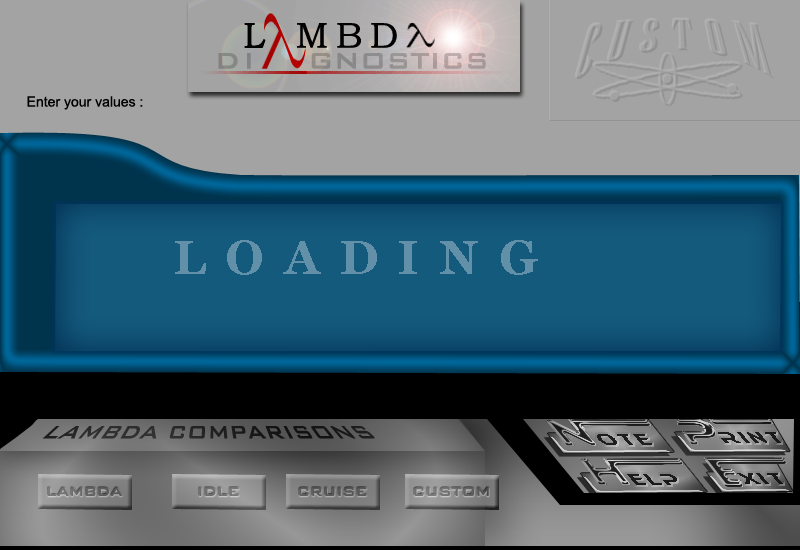
<style>
.page{position:relative;width:800px;height:550px;background:#a3a3a3}
.page>*{position:absolute;margin:0}
.t1{font:14px "ArialMT";color:#000000}
.t2{font:48px "Georgia-Bold";letter-spacing:0.4em;color:#6190a8}
.t3{font:24px "BankGothicBT-Medium";color:#1f1f1f}
.t4{font:20px "Ethnocentric";letter-spacing:0.2em;color:#1e1e1e;scale:0.77 1}
.t5{font:20px "Ethnocentric";letter-spacing:0.3em;color:#1e1e1e;scale:0.77 1}
.t6{font:20px "Ethnocentric";letter-spacing:0.2em;color:#1d1d1d;scale:0.77 1}
.t7{font:20px "Ethnocentric";letter-spacing:0.2em;color:#1a1a1a;scale:0.77 1}
.t8{font:16px "BankGothicBT-Medium";color:#646464}
.t9{font:16px "BankGothicBT-Medium";color:#737373}
.t10{font:16px "BankGothicBT-Medium";color:#575757}
.t11{font:16px "BankGothicBT-Medium";color:#6d6d6d}
</style>
<div class="page">
<p class="t1" style="left:27px;top:96px;width:116px;height:14px">Enter your values :</p>
<p class="t2" style="left:175px;top:240px;width:363px;height:35px">LOADING</p>
<p class="t3" style="left:42px;top:426px;width:333px;height:13px">LAMBDA COMPARISONS</p>
<p class="t4" style="left:597px;top:434px;width:55px;height:11px">o<span class="t5">t</span>e</p>
<p class="t6" style="left:718px;top:432px;width:63px;height:11px">RINT</p>
<p class="t7" style="left:737px;top:473px;width:46px;height:11px">XIT</p>
<p class="t7" style="left:627px;top:474px;width:50px;height:11px">ELP</p>
<p class="t8" style="left:48px;top:487px;width:75px;height:9px">LAMBDA</p>
<p class="t9" style="left:199px;top:487px;width:40px;height:9px">IDLE</p>
<p class="t10" style="left:299px;top:487px;width:68px;height:9px">CRUISE</p>
<p class="t11" style="left:414px;top:487px;width:75px;height:9px">CUSTOM</p>
</div>
